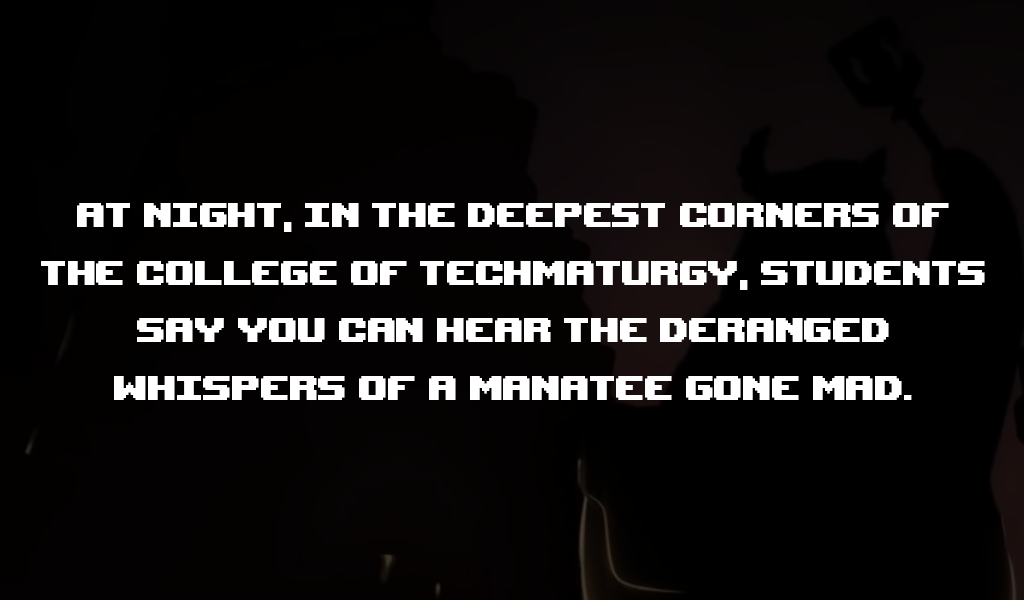
<style>
.page{position:relative;width:1024px;height:600px}
.page>*{position:absolute;margin:0}
.t1{font:48px "UpheavalPro-Regular";color:#ffffff}
</style>
<div class="page">
<p class="t1" style="left:41px;top:203px;width:944px;height:197px;text-align:center">At night, in the deepest corners of<br>the college of techmaturgy, students<br>say you can hear the deranged<br>whispers of a manatee gone mad.</p>
</div>
